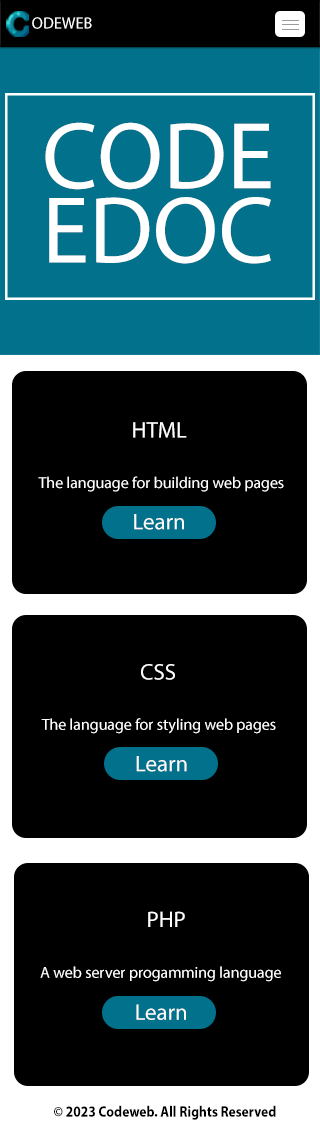
<style>
.page{position:relative;width:320px;height:1146px;background:#000000}
.page>*{position:absolute;margin:0}
.t1{font:16.1px "MyriadPro-Regular";color:#ffffff}
.t2{font:95.6px/74.3px "MyriadPro-Regular";color:#ffffff}
.t3{font:22.8px "MyriadPro-Regular";color:#ffffff}
.t4{font:15.9px "MyriadPro-Regular";color:#ffffff}
.t5{font:22.8px "MyriadPro-Regular";color:#fbfbfb}
.t6{font:15.3px "MyriadPro-Bold";color:#000000;scale:0.88 1}
</style>
<div class="page">
<p class="t1" style="left:32px;top:17px;width:60px;height:12px">ODEWEB</p>
<p class="t2" style="left:45px;top:122px;width:226px;height:142px;text-align:center">CODE<br>EDOC</p>
<p class="t3" style="left:133px;top:422px;width:54px;height:16px">HTML</p>
<p class="t4" style="left:38px;top:476px;width:246px;height:16px">The language for building web pages</p>
<p class="t5" style="left:134px;top:514px;width:50px;height:16px">Learn</p>
<p class="t3" style="left:141px;top:664px;width:34px;height:16px">CSS</p>
<p class="t4" style="left:41px;top:718px;width:235px;height:16px">The language for styling web pages</p>
<p class="t5" style="left:136px;top:756px;width:51px;height:16px">Learn</p>
<p class="t3" style="left:148px;top:911px;width:37px;height:16px">PHP</p>
<p class="t4" style="left:40px;top:966px;width:241px;height:16px">A web server progamming language</p>
<p class="t5" style="left:136px;top:1004px;width:50px;height:16px">Learn</p>
<p class="t6" style="left:54px;top:1105px;width:222px;height:15px">© 2023 Codeweb. All Rights Reserved</p>
</div>
